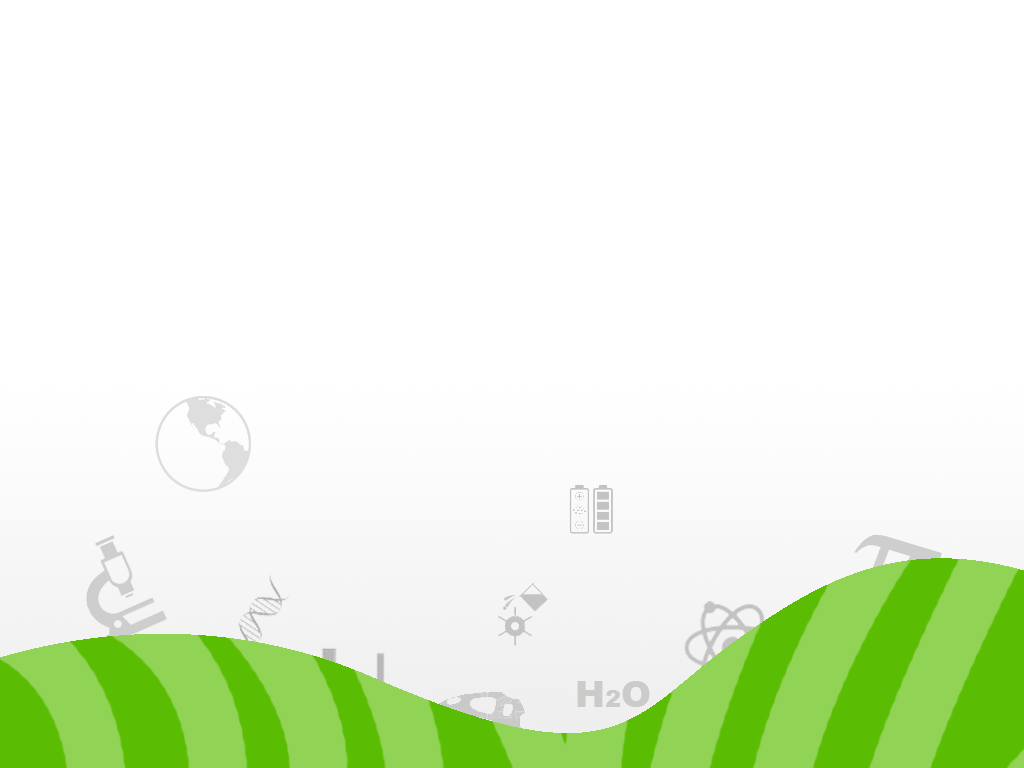
<style>
.page{position:relative;width:1024px;height:768px;background:#ffffff}
.page>*{position:absolute;margin:0}
.t1{font:36px "Arial-Black";color:#cdcaca}
.t2{font:24px "Arial-Black";color:#cdcaca}
</style>
<div class="page">
<p class="t1" style="left:577px;top:681px;width:73px;height:26px">H<span class="t2">2</span>O</p>
</div>
